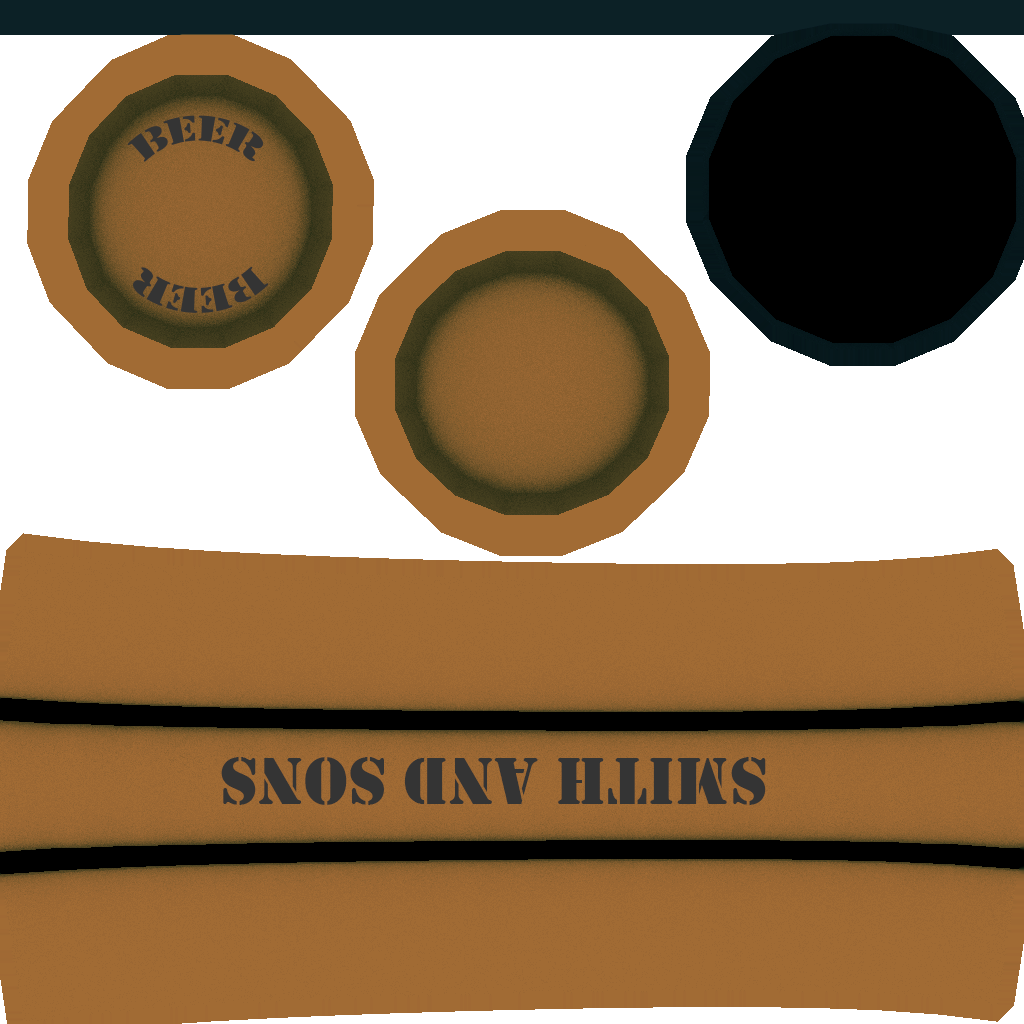
<style>
.page{position:relative;width:1024px;height:1024px;background:#a16b34}
.page>*{position:absolute;margin:0}
.t1{font:37px "Stencil";color:#343434}
.t2{font:69px "Stencil";color:#343434}
</style>
<div class="page">
<p class="t1" style="left:127px;top:115px;width:137px;height:47px">beer</p>
<p class="t1" style="left:133px;top:266px;width:136px;height:47px;rotate:180deg">beer</p>
<p class="t2" style="left:221px;top:757px;width:545px;height:48px;rotate:180deg">Smith and sons</p>
</div>
